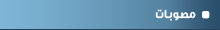
<style>
.page{position:relative;width:220px;height:30px}
.page>*{position:absolute;margin:0}
.t1{font:12px "Mj_Flow-Bold";color:#e7e7e7}
</style>
<div class="page">
<p class="t1" style="left:155px;top:9px;width:41px;height:12px">مصوبـات</p>
</div>
